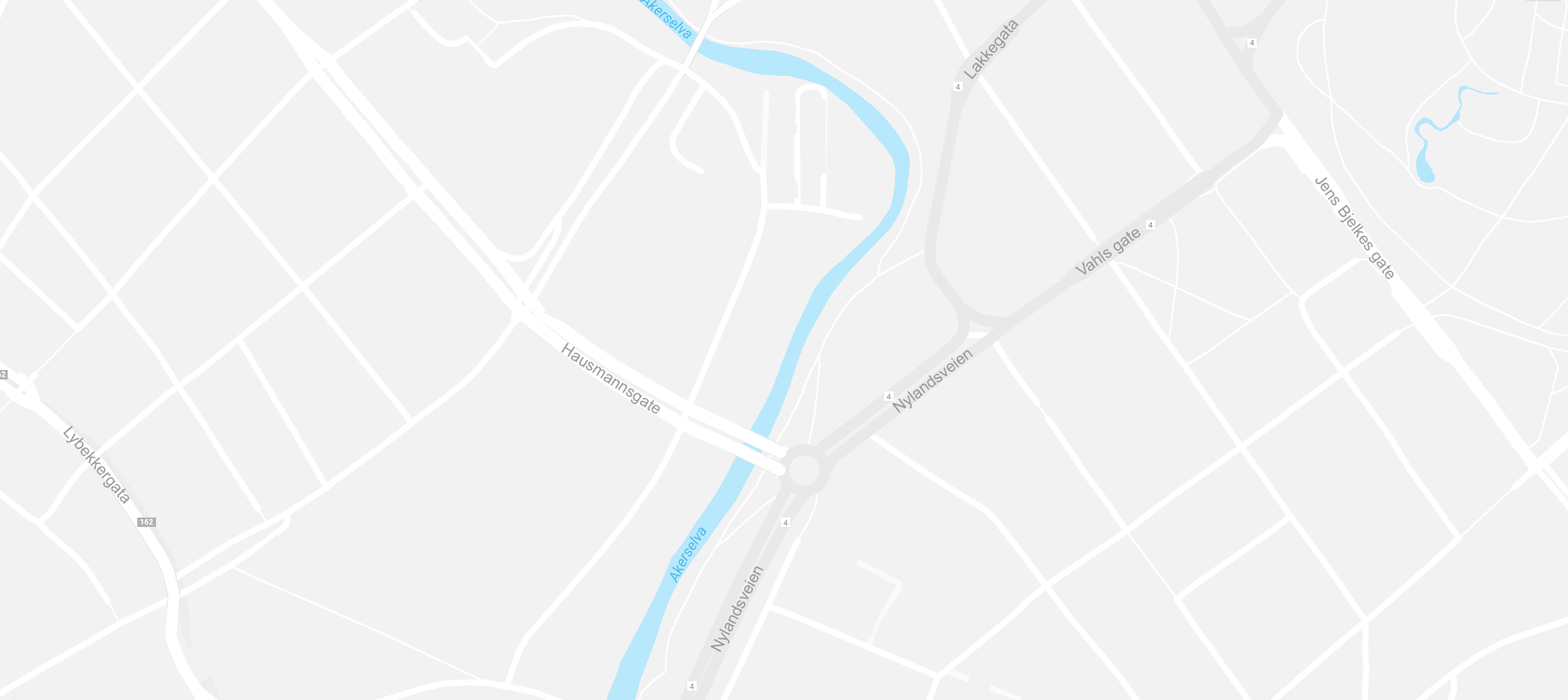
<style>
.page{position:relative;width:1568px;height:700px;background:#f2f2f2}
.page>*{position:absolute;margin:0}
.t1{font:15.9px "ArialMT";color:#979797}
</style>
<div class="page">
<p class="t1" style="left:963px;top:20px;width:56px;height:59px;rotate:-50deg">Lakkegata</p>
<p class="t1" style="left:1315px;top:176px;width:79px;height:104px;rotate:54deg">Jens Bjelkes gate</p>
<p class="t1" style="left:1074px;top:229px;width:67px;height:46px;rotate:-35deg">Vahls gate</p>
<p class="t1" style="left:561px;top:342px;width:99px;height:72px;rotate:33deg">Hausmannsgate</p>
<p class="t1" style="left:892px;top:350px;width:81px;height:64px;rotate:-38deg">Nylandsveien</p>
<p class="t1" style="left:63px;top:425px;width:67px;height:80px;rotate:49deg">Lybekkergata</p>
<p class="t1" style="left:710px;top:566px;width:54px;height:86px;rotate:-63deg">Nylandsveien</p>
</div>
